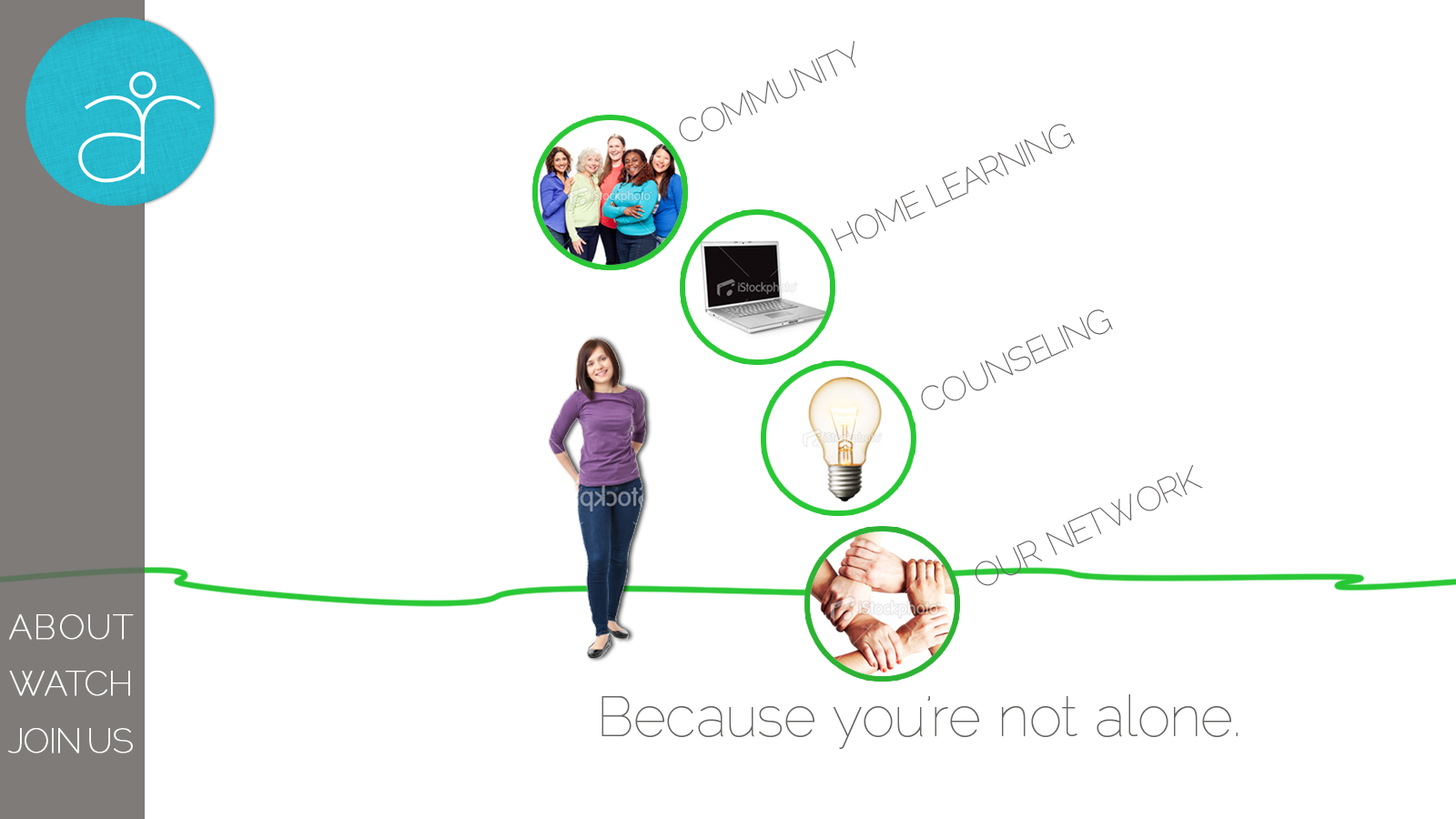
<style>
.page{position:relative;width:1456px;height:819px;background:#ffffff}
.page>*{position:absolute;margin:0}
.t1{font:34.1px "Raleway-Thin";letter-spacing:-0.02em;color:#676462}
.t2{font:34.1px/56.9px "Raleway-Thin";letter-spacing:-0.02em;color:#ffffff;font-weight:bold}
.t3{font:34.1px/56.9px "Raleway-Thin";letter-spacing:0.04em;color:#ffffff;font-weight:bold}
.t4{font:34.1px/56.9px "Raleway-Thin";letter-spacing:-0.08em;color:#ffffff;font-weight:bold}
.t5{font:34.1px/56.9px "Raleway-Thin";letter-spacing:-0.04em;color:#ffffff;font-weight:bold}
.t6{font:56.9px "Raleway-Thin";letter-spacing:-0.02em;color:#676462}
</style>
<div class="page">
<p class="t1" style="left:679px;top:41px;width:177px;height:101px;rotate:-25deg">COMMUNITY</p>
<p class="t1" style="left:831px;top:124px;width:244px;height:127px;rotate:-25deg">HOME LEARNING</p>
<p class="t1" style="left:921px;top:309px;width:192px;height:101px;rotate:-25deg">COUNSELING</p>
<p class="t1" style="left:975px;top:464px;width:228px;height:122px;rotate:-25deg">OUR NETWORK</p>
<p class="t2" style="left:8px;top:614px;width:126px;height:139px"><span class="t3">ABOUT<br></span><span class="t4">WA</span><span class="t5">T</span>CH<br>JOIN US</p>
<p class="t6" style="left:602px;top:694px;width:636px;height:55px">Because you’re not alone.</p>
</div>
